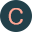
<style>
.page{position:relative;width:32px;height:32px;background:#22404a}
.page>*{position:absolute;margin:0}
.t1{font:22px "Gulim";color:#ffa896;font-weight:bold}
</style>
<div class="page">
<p class="t1" style="left:8px;top:8px;width:15px;height:17px">C</p>
</div>
